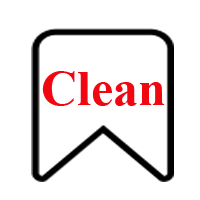
<style>
.page{position:relative;width:200px;height:200px;background:#ffffff}
.page>*{position:absolute;margin:0}
.t1{font:50px "TimesNewRomanPS-BoldMT";color:#f00712}
</style>
<div class="page">
<p class="t1" style="left:42px;top:71px;width:123px;height:35px">Clean</p>
</div>
